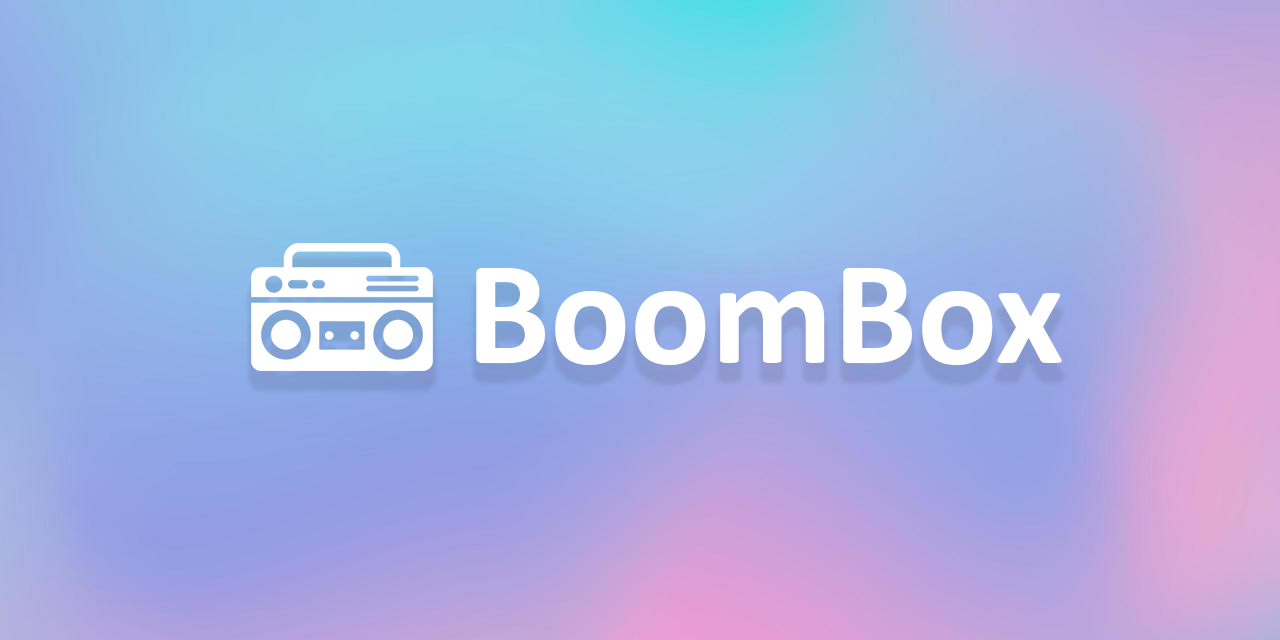
<style>
.page{position:relative;width:1280px;height:640px}
.page>*{position:absolute;margin:0}
.t1{font:150px "Calibri-Bold";color:#ffffff}
</style>
<div class="page">
<p class="t1" style="left:476px;top:268px;width:586px;height:97px">BoomBox</p>
</div>
